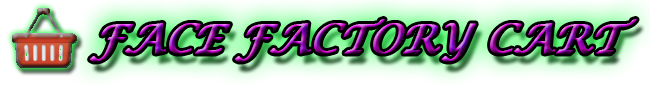
<style>
.page{position:relative;width:650px;height:86px}
.page>*{position:absolute;margin:0}
.t1{font:40px "LucidaCalligraphy-Italic";text-transform:uppercase;font-weight:bold;font-style:italic}
</style>
<div class="page">
<p class="t1" style="left:90px;top:19px;width:547px;height:43px">Face Factory cart</p>
</div>
